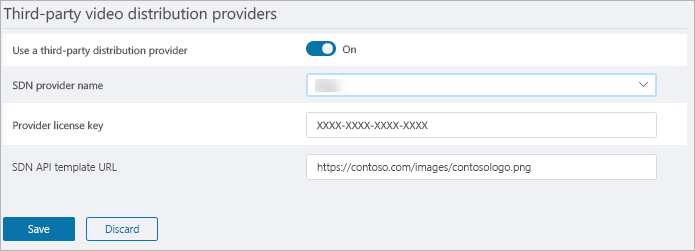
<style>
.page{position:relative;width:695px;height:251px;background:#f0f1f5}
.page>*{position:absolute;margin:0}
.t1{font:15.7px "SegoeUI";color:#505050}
.t2{font:10.4px "SegoeUI";color:#505050}
.t3{font:10.4px "SegoeUI"}
.t4{font:10.8px "SegoeUI-Semilight";color:#505050}
.t5{font:10.8px "SegoeUI-Semilight";color:#ffffff}
.t6{font:10.8px "SegoeUI-Semilight";color:#0874aa}
</style>
<div class="page">
<p class="t1" style="left:3px;top:7px;width:274px;height:16px">Third-party video distribution providers</p>
<p class="t2" style="left:13px;top:46px;width:175px;height:11px">Use a third-party distribution provider</p>
<p class="t2" style="left:342px;top:45px;width:14px;height:9px">On</p>
<p class="t2" style="left:12px;top:81px;width:91px;height:11px">SDN provider name</p>
<p class="t2" style="left:13px;top:121px;width:91px;height:11px">Provider license key</p>
<p class="t3" style="left:317px;top:121px;width:111px;height:9px">XXXX-XXXX-XXXX-XXXX</p>
<p class="t4" style="left:12px;top:163px;width:105px;height:10px">SDN API template URL</p>
<p class="t4" style="left:317px;top:163px;width:214px;height:10px">https://contoso.com/images/contosologo.png</p>
<p class="t5" style="left:28px;top:225px;width:22px;height:8px">Save</p>
<p class="t6" style="left:105px;top:225px;width:34px;height:8px">Discard</p>
</div>
